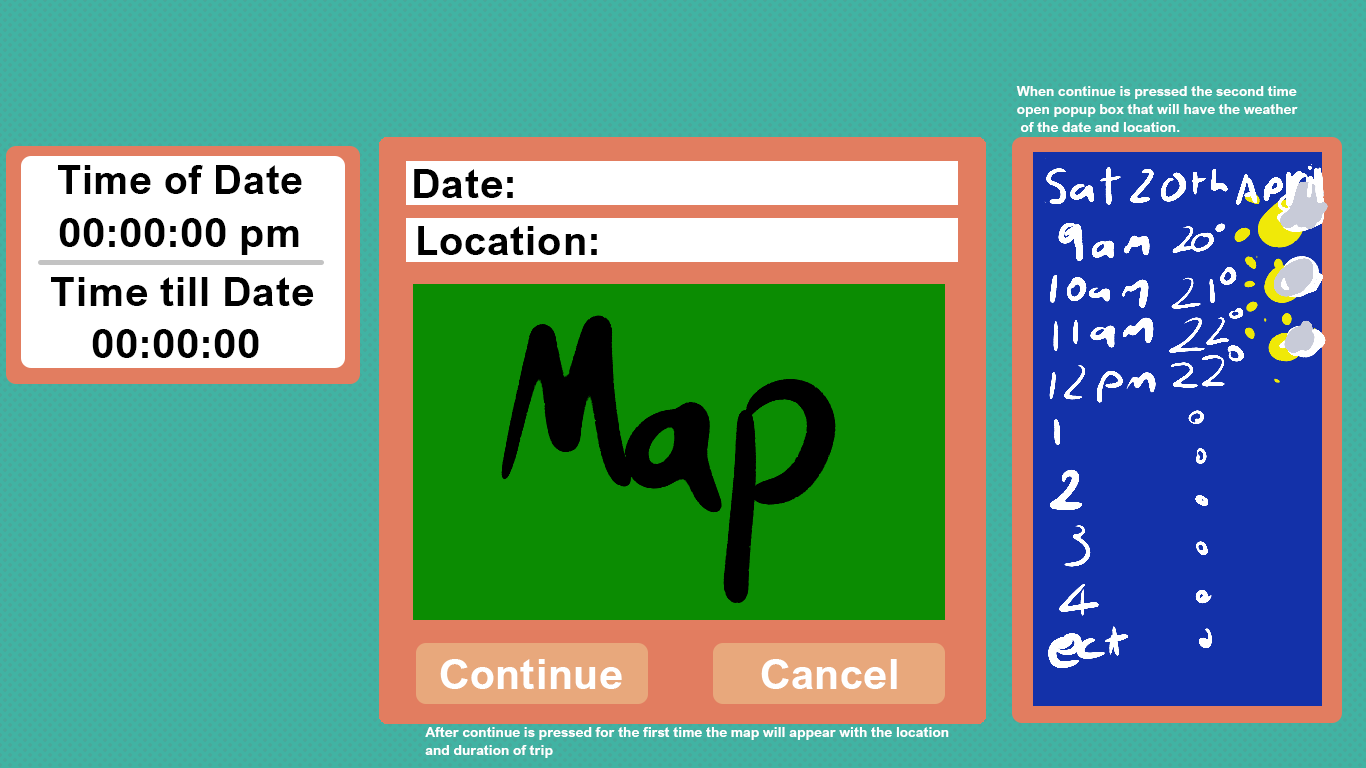
<style>
.page{position:relative;width:1366px;height:768px;background:#41b3a3}
.page>*{position:absolute;margin:0}
.t1{font:13.5px/18px "ArialNova-Bold";letter-spacing:0.02em;color:#ffffff}
.t2{font:40px "ArialNova-Bold";letter-spacing:0.02em;color:#000000}
.t3{font:41px "ArialNova-Bold";letter-spacing:0.02em;color:#000000}
.t4{font:41.5px "ArialNova-Bold";letter-spacing:0.02em;color:#ffffff}
</style>
<div class="page">
<p class="t1" style="left:1016px;top:86px;width:282px;height:46px">When continue is pressed the second time<br>open popup box that will have the weather<br> of the date and location.</p>
<p class="t2" style="left:58px;top:165px;width:244px;height:29px">Time of Date</p>
<p class="t3" style="left:414px;top:169px;width:99px;height:29px">Date:</p>
<p class="t3" style="left:59px;top:218px;width:240px;height:37px">00:00:00 pm</p>
<p class="t3" style="left:418px;top:226px;width:179px;height:29px">Location:</p>
<p class="t3" style="left:51px;top:277px;width:263px;height:29px">Time till Date</p>
<p class="t3" style="left:92px;top:329px;width:167px;height:29px">00:00:00</p>
<p class="t4" style="left:440px;top:659px;width:182px;height:30px">Continue</p>
<p class="t4" style="left:761px;top:659px;width:136px;height:30px">Cancel</p>
<p class="t1" style="left:425px;top:727px;width:524px;height:31px">After continue is pressed for the first time the map will appear with the location <br>and duration of trip</p>
</div>
